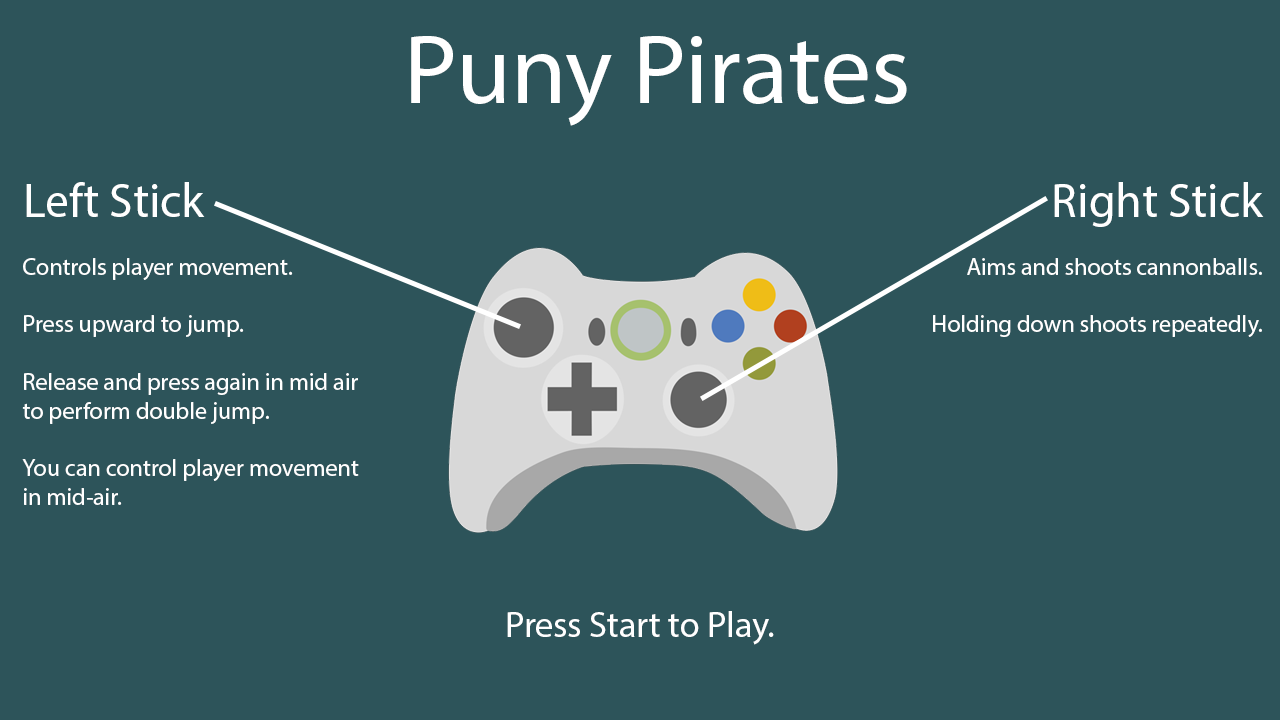
<style>
.page{position:relative;width:1280px;height:720px;background:#2d545a}
.page>*{position:absolute;margin:0}
.t1{font:100px "MyriadPro-Regular";color:#ffffff}
.t2{font:24px "MyriadPro-Regular";color:#ffffff}
.t3{font:48px "MyriadPro-Regular";color:#ffffff}
.t4{font:36px "MyriadPro-Regular";color:#ffffff}
</style>
<div class="page">
<p class="t1" style="left:411px;top:36px;width:496px;height:90px">Puny Pirates</p>
<p class="t2" style="left:22px;top:182px;width:337px;height:323px"><span class="t3">Left Stick</span><br><br>Controls player movement.<br><br>Press upward to jump.<br><br>Release and press again in mid air to perform double jump.<br><br>You can control player movement in mid-air.</p>
<p class="t2" style="left:933px;top:182px;width:331px;height:155px;text-align:right"><span class="t3">Right Stick</span><br><br>Aims and shoots cannonballs.<br><br>Holding down shoots repeatedly.</p>
<p class="t4" style="left:507px;top:611px;width:267px;height:34px">Press Start to Play.</p>
</div>
